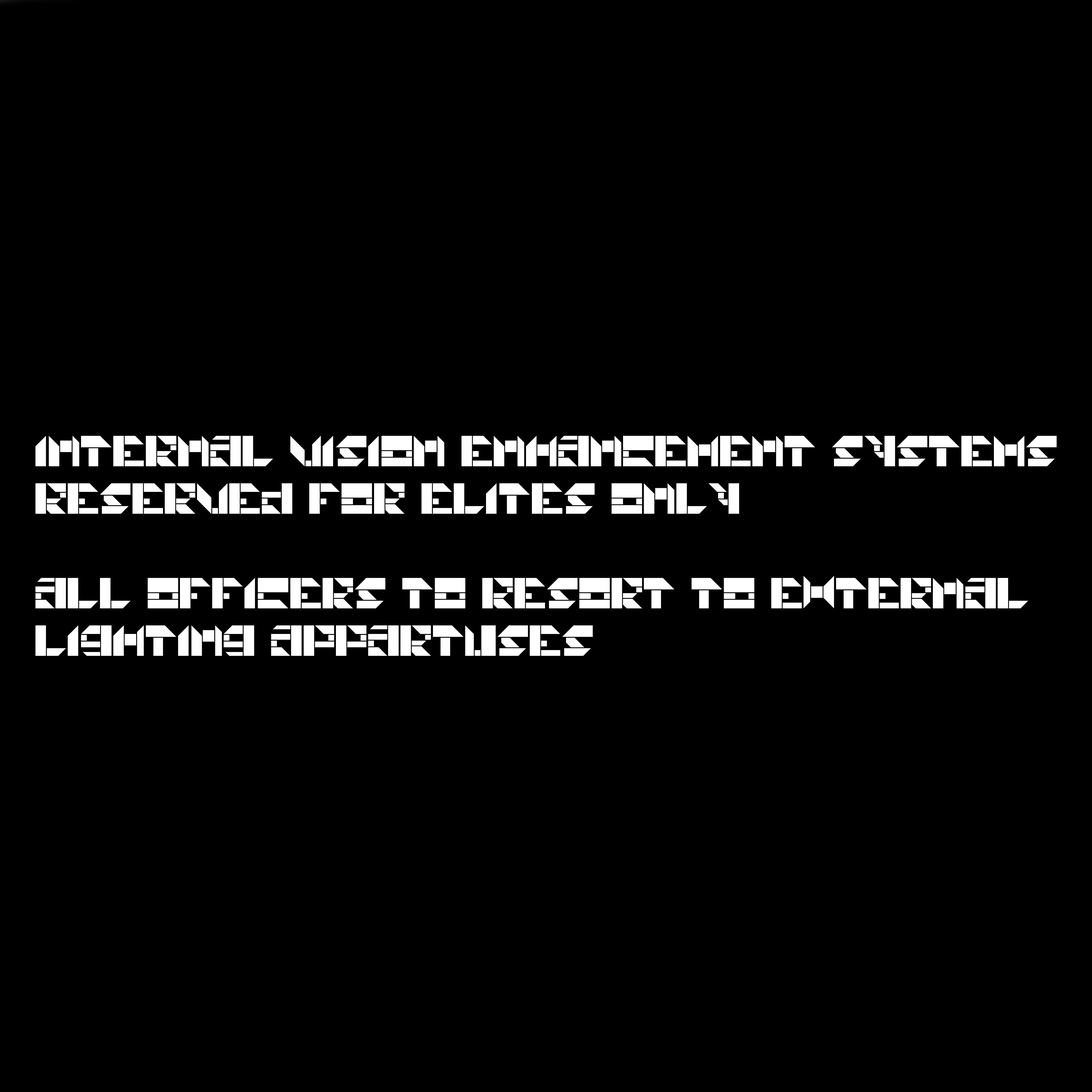
<style>
.page{position:relative;width:1092px;height:1092px;background:#000000}
.page>*{position:absolute;margin:0}
.t1{font:30.4px/47.4px "Universal-Union";color:#ffffff}
</style>
<div class="page">
<p class="t1" style="left:35px;top:436px;width:1022px;height:220px">Internal vision enhancement systems<br>reserved for elites only<br><br>All officers to resort to external<br>lighting appartuses</p>
</div>
